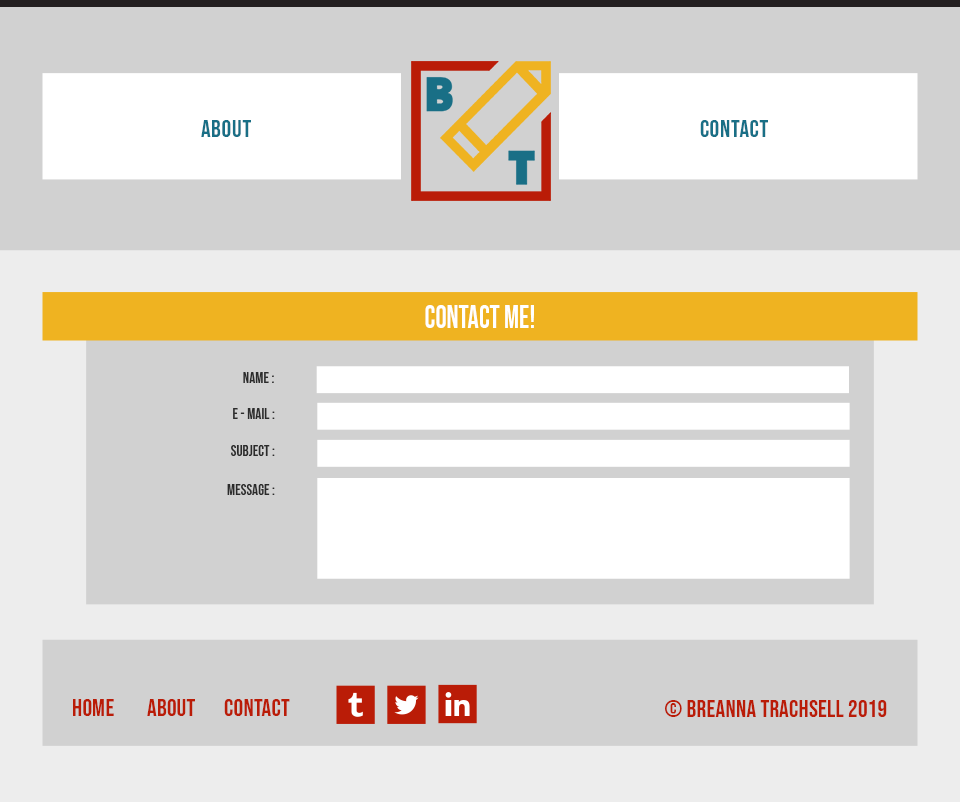
<style>
.page{position:relative;width:960px;height:802px;background:#d1d1d1}
.page>*{position:absolute;margin:0}
.t1{font:24px "BebasNeue-Regular";letter-spacing:0.03em;color:#196f86}
.t2{font:31.9px "BebasNeue-Regular";color:#ffffff;scale:0.88 1}
.t3{font:15px "BebasNeue-Regular";letter-spacing:0.005em;color:#2b2b2b}
.t4{font:24px "BebasNeue-Regular";letter-spacing:0.01em;color:#ba1c07}
</style>
<div class="page">
<p class="t1" style="left:201px;top:120px;width:50px;height:17px">About</p>
<p class="t1" style="left:700px;top:120px;width:68px;height:17px">Contact</p>
<p class="t2" style="left:425px;top:305px;width:109px;height:23px">Contact Me!</p>
<p class="t3" style="left:243px;top:372px;width:31px;height:11px">Name :</p>
<p class="t3" style="left:233px;top:408px;width:42px;height:11px">E - Mail :</p>
<p class="t3" style="left:231px;top:445px;width:44px;height:11px">Subject :</p>
<p class="t3" style="left:227px;top:484px;width:48px;height:11px">Message :</p>
<p class="t4" style="left:73px;top:699px;width:217px;height:17px">Home        About       Contact</p>
<p class="t4" style="left:665px;top:700px;width:222px;height:17px">© Breanna Trachsell 2019</p>
</div>
